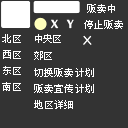
<style>
.page{position:relative;width:128px;height:128px;background:#333333}
.page>*{position:absolute;margin:0}
.t1{font:10px "Zfull-GB";letter-spacing:0.005em;color:#ffffff}
.t2{font:10px/16px "Zfull-GB";letter-spacing:0.025em;color:#ffffff}
.t3{font:10px "Zfull-GB";letter-spacing:-0.095em;color:#ffffff}
.t4{font:10px "Zfull-GB";letter-spacing:0.025em;color:#ffffff}
</style>
<div class="page">
<p class="t1" style="left:87px;top:4px;width:28px;height:9px">贩卖中</p>
<p class="t1" style="left:84px;top:20px;width:39px;height:9px">停止贩卖</p>
<p class="t2" style="left:2px;top:34px;width:19px;height:57px">北区<br>西区<br>东区<br>南区</p>
<p class="t3" style="left:35px;top:34px;width:26px;height:9px">中央区</p>
<p class="t3" style="left:34px;top:51px;width:18px;height:9px">郊区</p>
<p class="t4" style="left:34px;top:68px;width:60px;height:9px">切换贩卖计划</p>
<p class="t4" style="left:34px;top:84px;width:60px;height:9px">贩卖宣传计划</p>
<p class="t4" style="left:34px;top:100px;width:39px;height:9px">地区详细</p>
</div>
